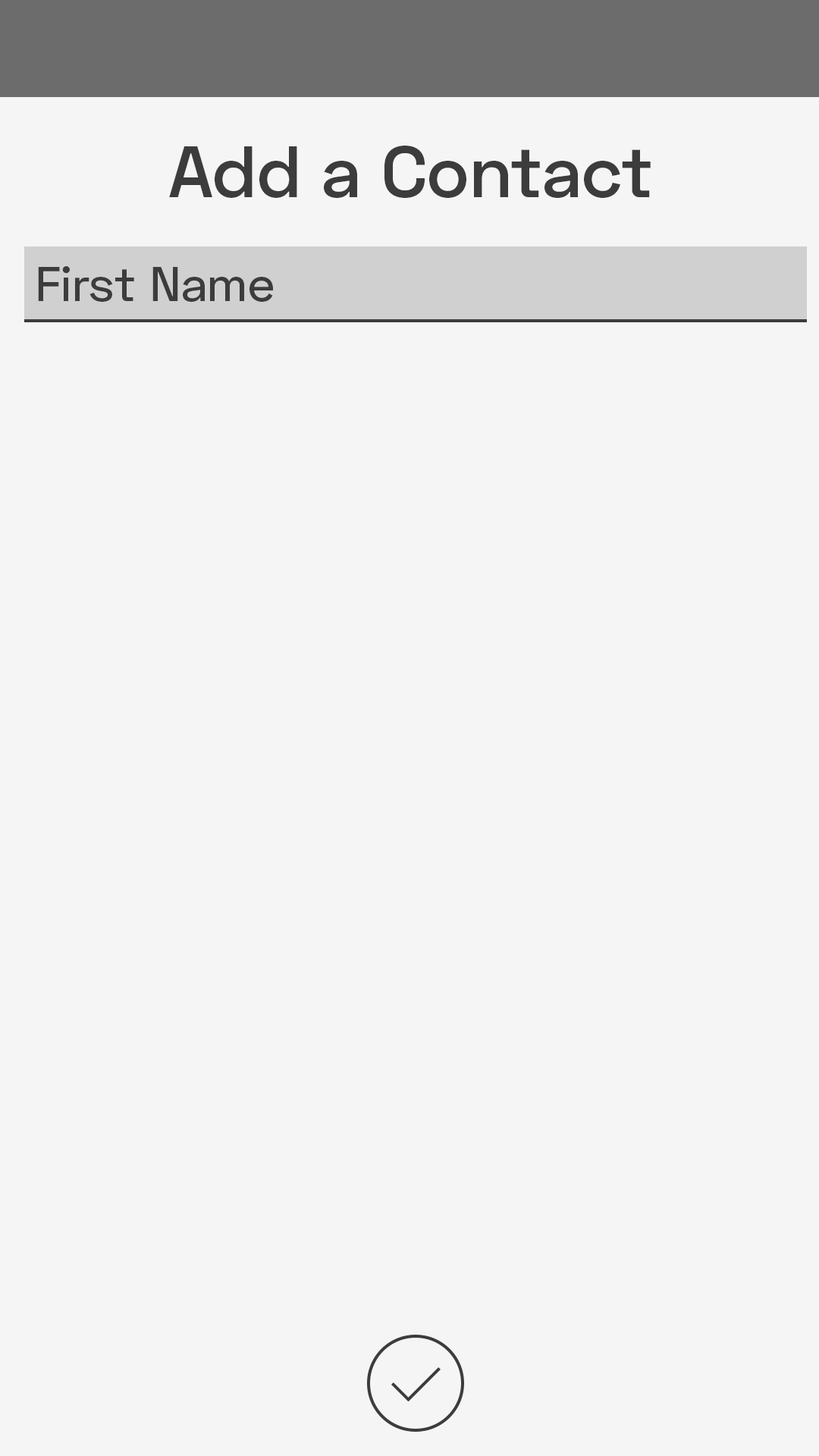
<style>
.page{position:relative;width:819px;height:1456px;background:#f5f5f5}
.page>*{position:absolute;margin:0}
.t1{font:72.8px "SpaceGrotesk-SemiBold";color:#3c3c3c}
.t2{font:48.5px "SpaceGrotesk-Medium";color:#3c3c3c}
</style>
<div class="page">
<p class="t1" style="left:169px;top:146px;width:482px;height:52px">Add a Contact</p>
<p class="t2" style="left:38px;top:266px;width:235px;height:36px">First Name</p>
</div>
